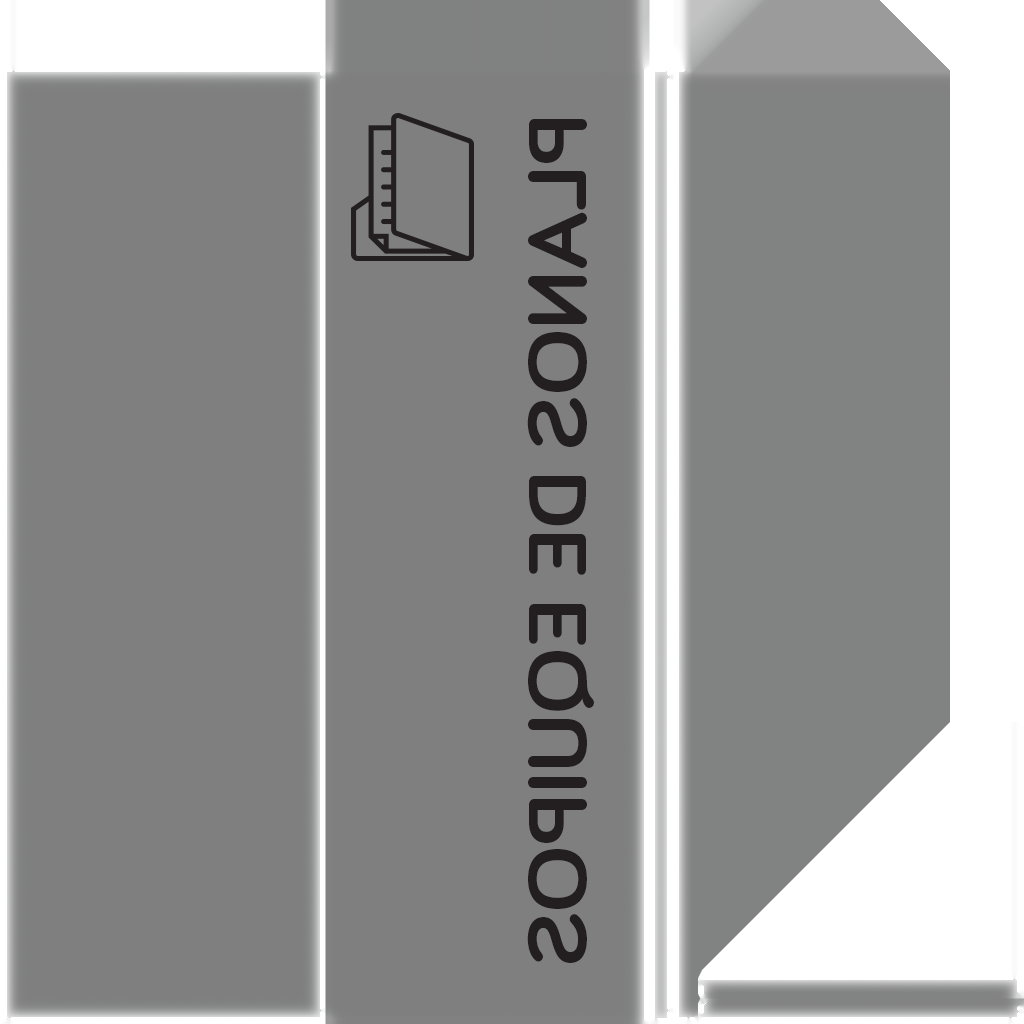
<style>
.page{position:relative;width:1024px;height:1024px;background:#7f7f7f}
.page>*{position:absolute;margin:0}
.t1{font:85px "Bariol-Bold";color:#231f20;scale:1.11 1}
</style>
<div class="page">
<p class="t1" style="left:527px;top:119px;width:67px;height:844px;rotate:90deg">PLANOS DE EQUIPOS</p>
</div>
